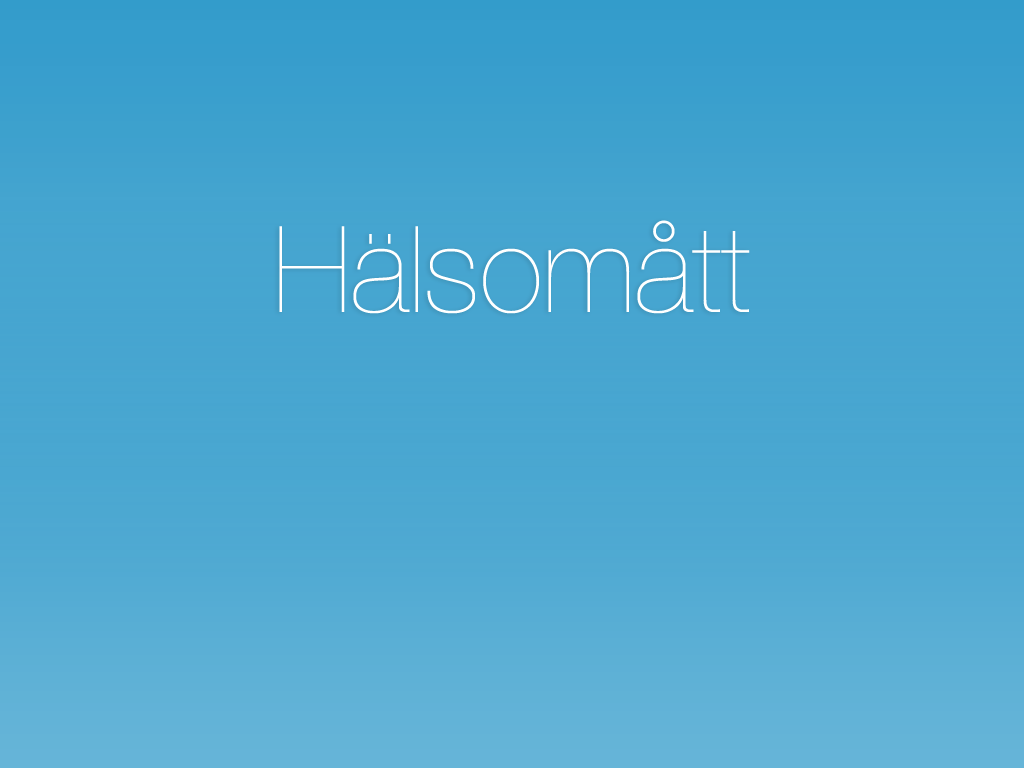
<style>
.page{position:relative;width:1024px;height:768px}
.page>*{position:absolute;margin:0}
.t1{font:120px "HelveticaNeue-UltraLight";color:#ffffff}
</style>
<div class="page">
<p class="t1" style="left:279px;top:220px;width:471px;height:94px">Hälsomått</p>
</div>
